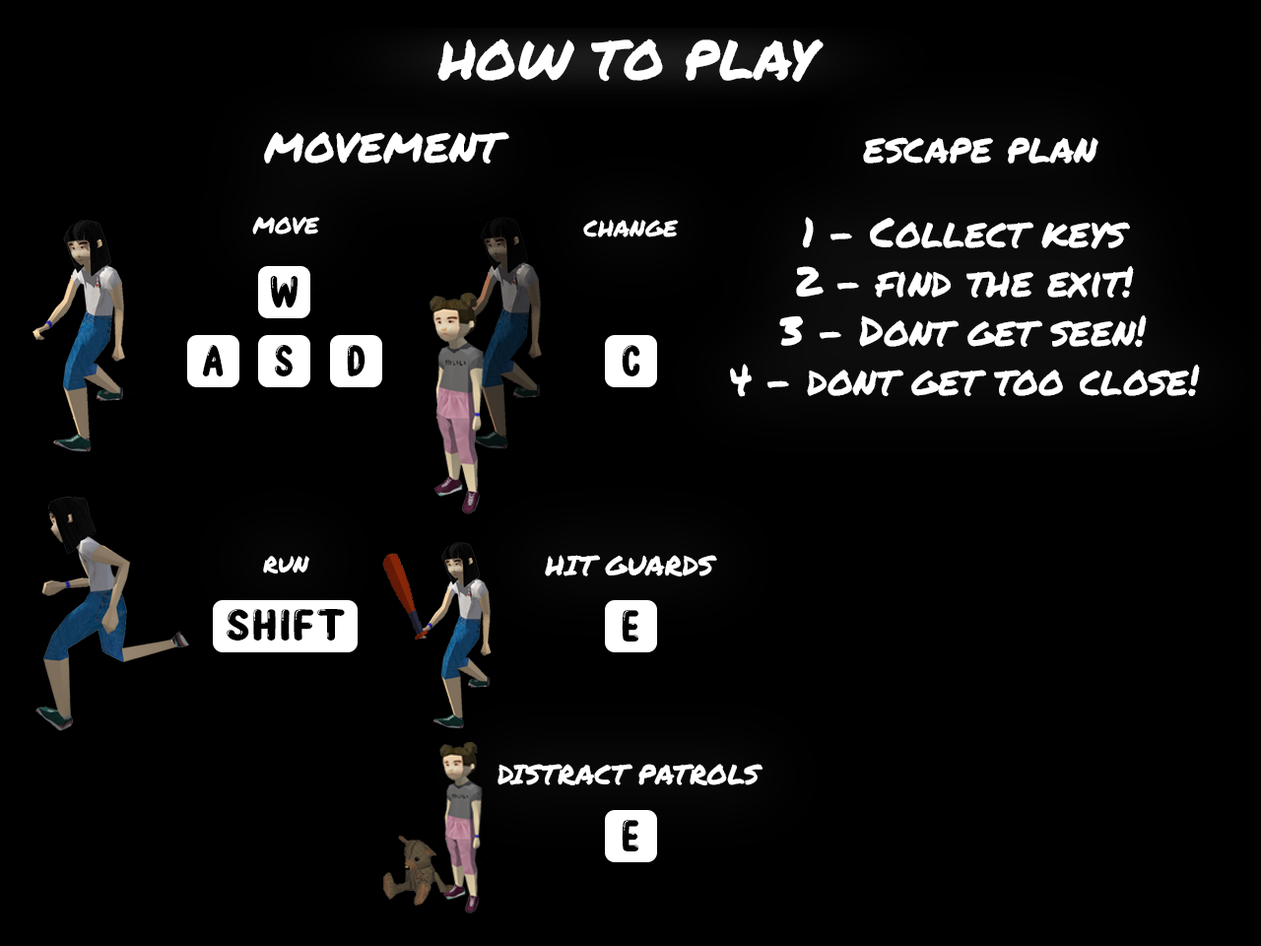
<style>
.page{position:relative;width:1261px;height:946px;background:#000000}
.page>*{position:absolute;margin:0}
.t1{font:54.7px "PermanentMarker-Regular";color:#ffffff}
.t2{font:41px "PermanentMarker-Regular";color:#ffffff}
.t3{font:27.4px "PermanentMarker-Regular";color:#ffffff}
.t4{font:44.9px "BubbleBobble";color:#000000}
.t5{font:44.6px "BubbleBobble";color:#000000;scale:1.24 1}
</style>
<div class="page">
<p class="t1" style="left:437px;top:38px;width:387px;height:44px">HOW TO PLAY</p>
<p class="t2" style="left:264px;top:132px;width:245px;height:32px">MOVEMENT</p>
<p class="t2" style="left:863px;top:137px;width:235px;height:27px">escape plan</p>
<p class="t3" style="left:252px;top:217px;width:68px;height:17px">move</p>
<p class="t3" style="left:583px;top:220px;width:96px;height:17px">change</p>
<p class="t2" style="left:730px;top:217px;width:470px;height:180px;text-align:center">1 - Collect keys<br>2 - find the exit!<br>3 - Dont get seen!<br>4 - dont get too close!</p>
<p class="t4" style="left:270px;top:276px;width:27px;height:32px">W</p>
<p class="t4" style="left:202px;top:345px;width:22px;height:31px">A</p>
<p class="t4" style="left:275px;top:345px;width:18px;height:31px">S</p>
<p class="t4" style="left:347px;top:345px;width:18px;height:31px">D</p>
<p class="t4" style="left:622px;top:345px;width:18px;height:31px">C</p>
<p class="t3" style="left:263px;top:556px;width:46px;height:17px">run</p>
<p class="t3" style="left:545px;top:555px;width:172px;height:21px">HIT GUARDS</p>
<p class="t5" style="left:227px;top:609px;width:118px;height:31px">SHIFT</p>
<p class="t4" style="left:622px;top:610px;width:16px;height:31px">E</p>
<p class="t3" style="left:497px;top:763px;width:265px;height:22px">DISTRACT PATROLS</p>
<p class="t4" style="left:622px;top:820px;width:16px;height:31px">E</p>
</div>
